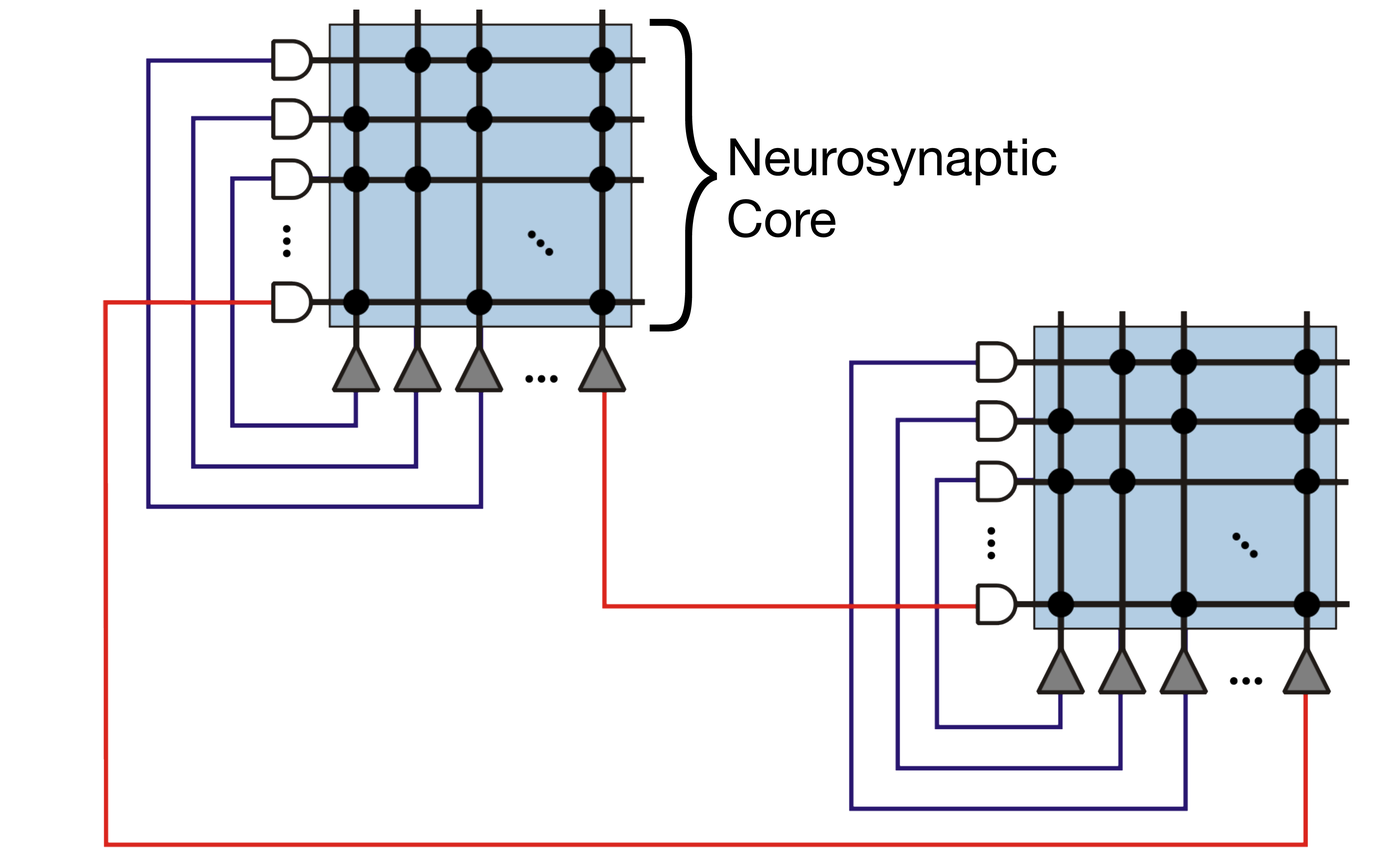
<style>
.page{position:relative;width:1377px;height:866px;background:#ffffff}
.page>*{position:absolute;margin:0}
.t1{font:344.6px "HelveticaNeue-UltraLight";color:#000000}
.t2{font:51.3px "HelveticaNeue";color:#000000}
</style>
<div class="page">
<p class="t1" style="left:650px;top:19px;width:67px;height:313px">}</p>
<p class="t2" style="left:729px;top:138px;width:328px;height:100px">Neurosynaptic <br>Core</p>
</div>
